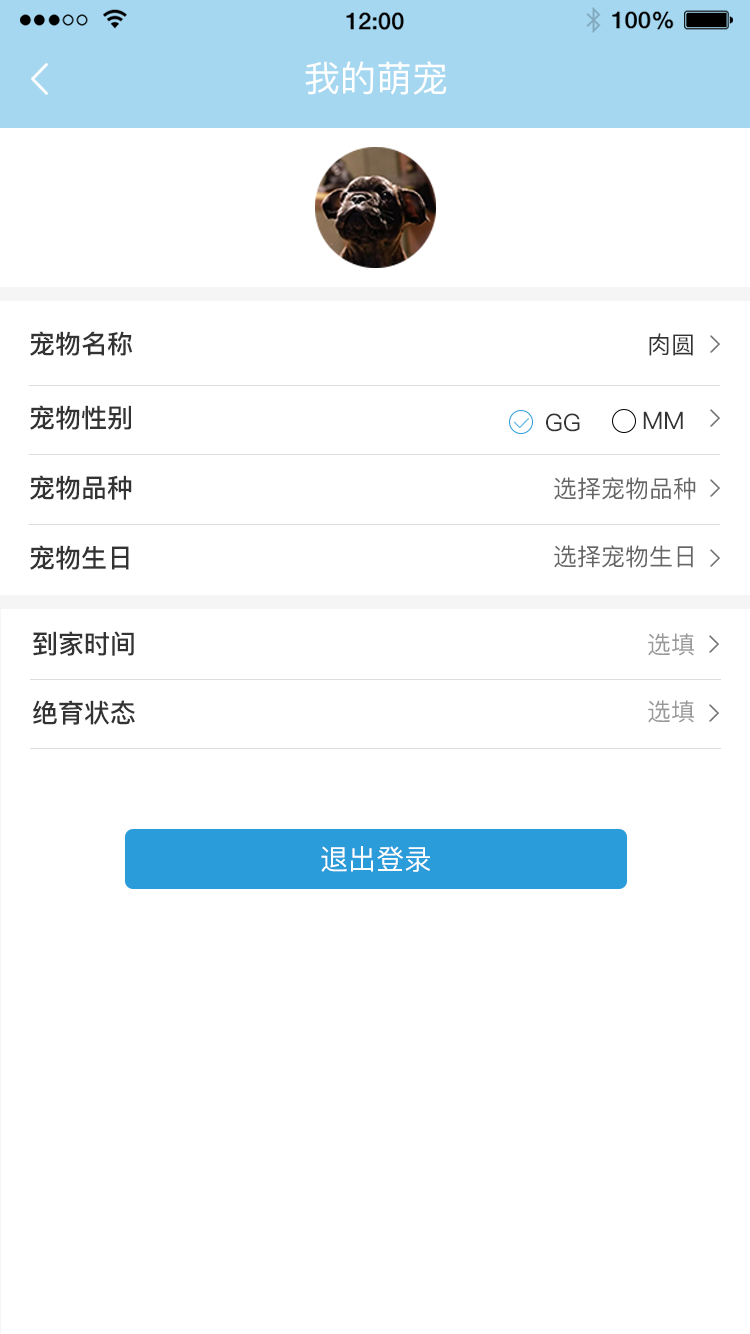
<style>
.page{position:relative;width:750px;height:1334px;background:#ffffff}
.page>*{position:absolute;margin:0}
.t1{font:36px "PingFangSC-Regular";color:#ffffff}
.t2{font:26px "PingFangSC-Medium";color:#333333}
.t3{font:24px "PingFangSC-Regular";color:#333333}
.t4{font:24px "PingFangSC-Regular";color:#666666}
.t5{font:24px "PingFangSC-Regular";color:#999999}
.t6{font:28px "PingFangSC-Regular";color:#ffffff}
</style>
<div class="page">
<p class="t1" style="left:305px;top:61px;width:142px;height:34px">我的萌宠</p>
<p class="t2" style="left:30px;top:331px;width:103px;height:25px">宠物名称</p>
<p class="t3" style="left:649px;top:333px;width:44px;height:23px">肉圆</p>
<p class="t2" style="left:30px;top:405px;width:101px;height:25px">宠物性别</p>
<p class="t3" style="left:546px;top:413px;width:34px;height:19px">GG</p>
<p class="t3" style="left:643px;top:411px;width:40px;height:18px">MM</p>
<p class="t2" style="left:30px;top:475px;width:102px;height:25px">宠物品种</p>
<p class="t4" style="left:554px;top:477px;width:142px;height:23px">选择宠物品种</p>
<p class="t2" style="left:30px;top:545px;width:99px;height:25px">宠物生日</p>
<p class="t4" style="left:554px;top:545px;width:139px;height:23px">选择宠物生日</p>
<p class="t2" style="left:33px;top:631px;width:101px;height:25px">到家时间</p>
<p class="t5" style="left:648px;top:633px;width:46px;height:23px">选填</p>
<p class="t2" style="left:33px;top:700px;width:102px;height:25px">绝育状态</p>
<p class="t5" style="left:648px;top:700px;width:46px;height:23px">选填</p>
<p class="t6" style="left:321px;top:846px;width:109px;height:26px">退出登录</p>
</div>
